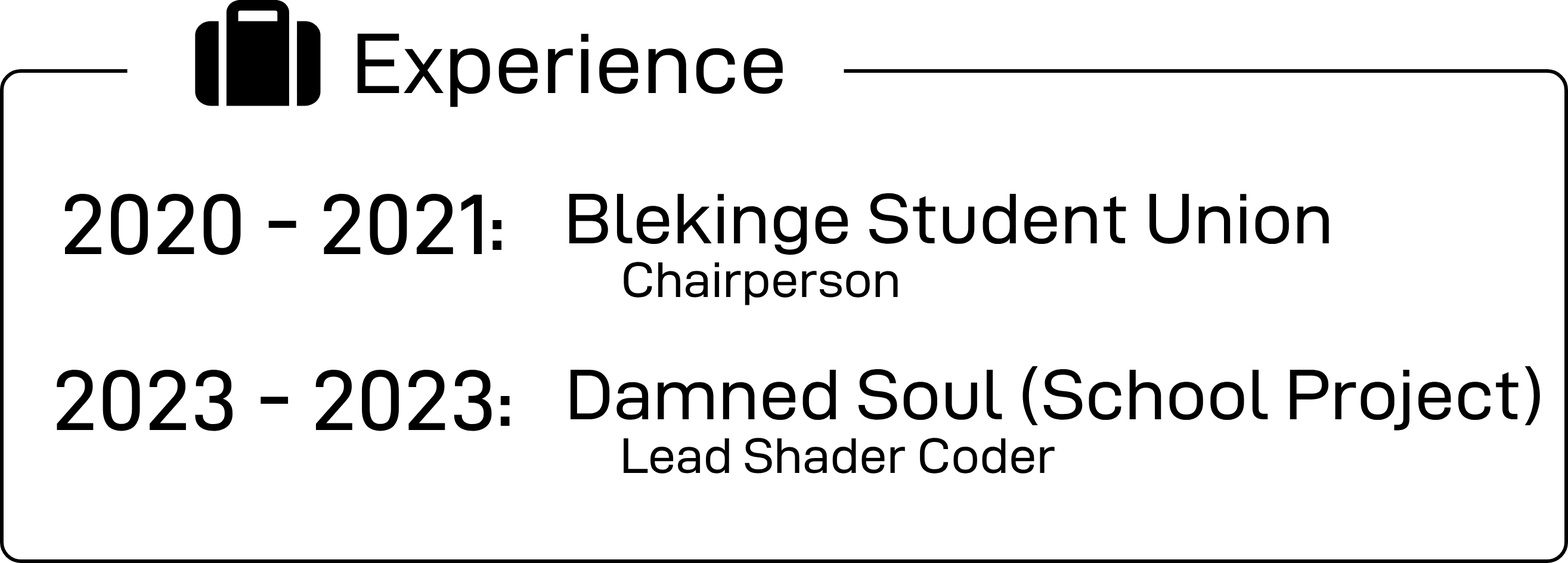
<style>
.page{position:relative;width:1568px;height:563px;background:#ffffff}
.page>*{position:absolute;margin:0}
.t1{font:85.9px "D-DINExp";color:#000000}
.t2{font:71.6px "D-DINExp";color:#000000}
.t3{font:50.1px "D-DINExp";color:#000000}
</style>
<div class="page">
<p class="t1" style="left:357px;top:33px;width:426px;height:74px">Experience</p>
<p class="t1" style="left:64px;top:194px;width:438px;height:61px">2020 - 2021:</p>
<p class="t2" style="left:569px;top:193px;width:760px;height:62px">Blekinge Student Union</p>
<p class="t3" style="left:624px;top:262px;width:274px;height:43px">Chairperson</p>
<p class="t1" style="left:57px;top:370px;width:453px;height:61px">2023 - 2023:</p>
<p class="t2" style="left:570px;top:366px;width:970px;height:64px">Damned Soul (School Project)</p>
<p class="t3" style="left:624px;top:438px;width:431px;height:35px">Lead Shader Coder</p>
</div>
